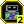
<style>
.page{position:relative;width:24px;height:24px}
.page>*{position:absolute;margin:0}
.t1{font:9px "Montserrat-Bold";color:#000000}
</style>
<div class="page">
<p class="t1" style="left:17px;top:16px;width:6px;height:7px">2</p>
</div>
